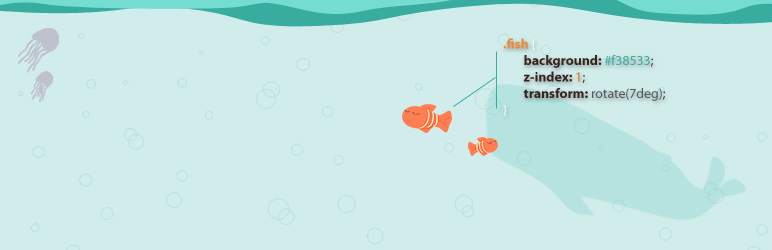
<style>
.page{position:relative;width:772px;height:250px;background:#d1edeb}
.page>*{position:absolute;margin:0}
.t1{font:13.8px "MyriadPro-Regular";color:#56595d}
.t2{font:13.8px "MyriadPro-Bold";color:#f38533}
.t3{font:13.8px "MyriadPro-Regular";color:#fefefe}
.t4{font:13.8px "MyriadPro-Bold";color:#3a211e}
.t5{font:13.8px "MyriadPro-Regular";color:#39aca0}
.t6{font:13.8px "MyriadPro-Regular";color:#3a211e}
.t7{font:13.8px "MyriadPro-Regular";color:#f26f20}
.t8{font:13.8px "MyriadPro-Regular";color:#ffffff}
</style>
<div class="page">
<p class="t1" style="left:503px;top:38px;width:162px;height:79px"><span class="t2">.fish </span><span class="t3">{<br> </span><span class="t4">background: </span><span class="t5">#f38533</span><span class="t6">;<br> </span><span class="t4">z-index: </span><span class="t7">1</span><span class="t6">;<br> </span><span class="t4">transform: </span>rotate(7deg)<span class="t6">;<br></span><span class="t8">}</span></p>
</div>
